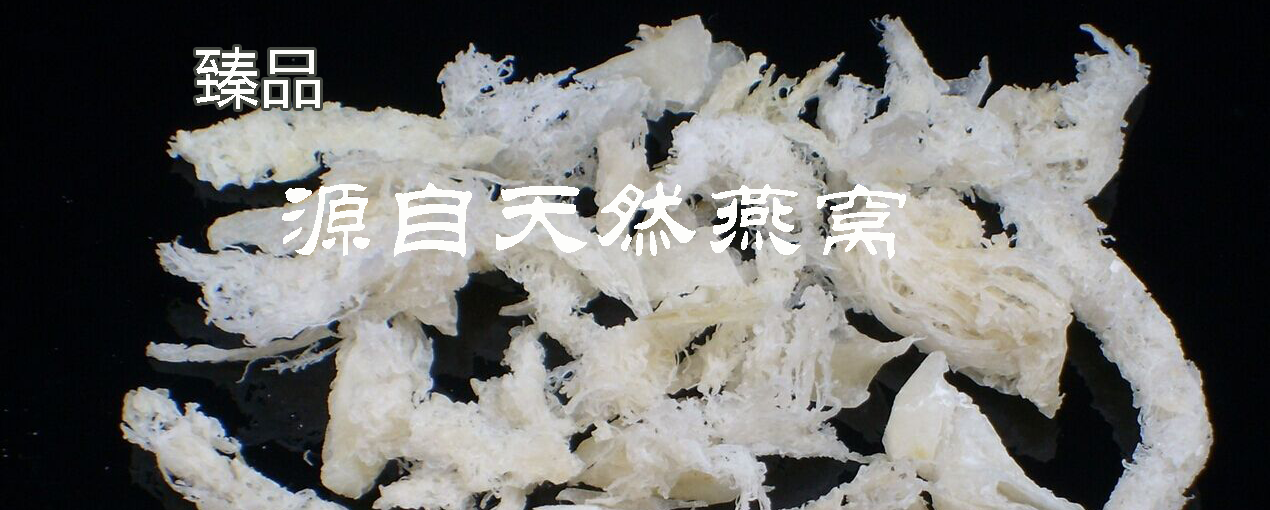
<style>
.page{position:relative;width:1270px;height:510px}
.page>*{position:absolute;margin:0}
.t1{font:64px "MicrosoftYaHei";color:#fdfdfb}
.t2{font:106.7px "STLiti";color:#fdfdfb}
</style>
<div class="page">
<p class="t1" style="left:196px;top:47px;width:124px;height:62px">臻品</p>
<p class="t2" style="left:282px;top:182px;width:624px;height:77px">源自天然燕窝</p>
</div>
